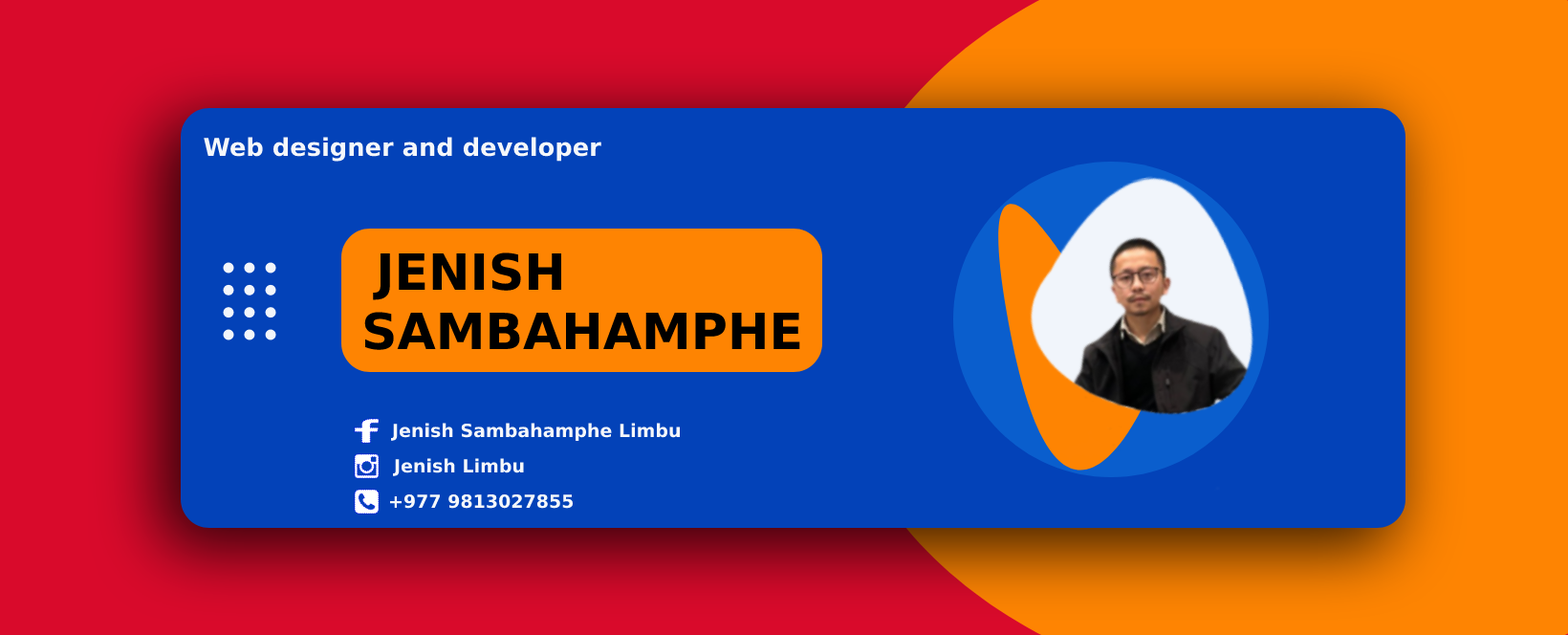
<style>
.page{position:relative;width:1568px;height:635px;background:#0342b8}
.page>*{position:absolute;margin:0}
.t1{font:24.6px "DejaVuSans-Bold";color:#f5f7fa}
.t2{font:49.7px "DejaVuSans-Bold";color:#000000}
.t3{font:18.2px "DejaVuSans-Bold";color:#f5f7fa}
</style>
<div class="page">
<p class="t1" style="left:204px;top:137px;width:397px;height:25px">Web designer and developer</p>
<p class="t2" style="left:364px;top:252px;width:436px;height:98px">JENISH<br>SAMBAHAMPHE</p>
<p class="t3" style="left:390px;top:423px;width:290px;height:18px">Jenish Sambahamphe Limbu</p>
<p class="t3" style="left:392px;top:458px;width:132px;height:18px">Jenish Limbu</p>
<p class="t3" style="left:390px;top:493px;width:184px;height:16px">+977 9813027855</p>
</div>
